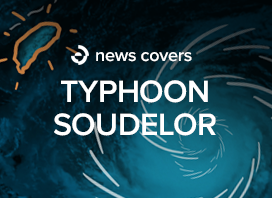
<style>
.page{position:relative;width:272px;height:198px}
.page>*{position:absolute;margin:0}
.t1{font:18px "ProximaNova-Semibold";letter-spacing:-0.015em;color:#ffffff}
.t2{font:32px/33px "ProximaNova-Semibold";letter-spacing:-0.015em;color:#ffffff}
</style>
<div class="page">
<p class="t1" style="left:96px;top:52px;width:96px;height:10px">news covers</p>
<p class="t2" style="left:54px;top:80px;width:162px;height:56px;text-align:center">TYPHOON<br>SOUDELOR</p>
</div>
